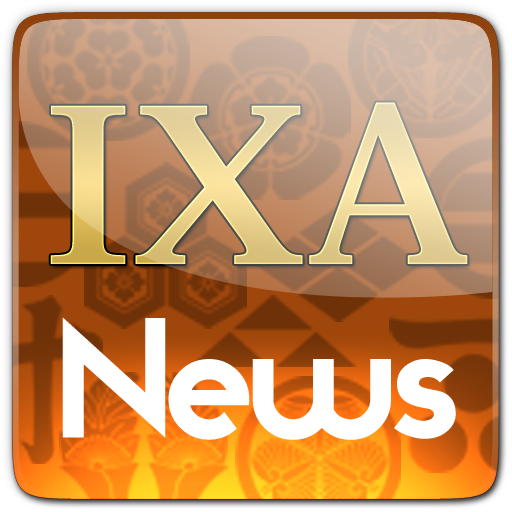
<style>
.page{position:relative;width:512px;height:512px}
.page>*{position:absolute;margin:0}
.t1{font:211.7px "KozMinPro-Bold";scale:1.19 1}
.t2{font:150.5px "Moderna";letter-spacing:-0.045em;color:#ffffff}
</style>
<div class="page">
<p class="t1" style="left:50px;top:102px;width:418px;height:162px">IXA</p>
<p class="t2" style="left:62px;top:317px;width:394px;height:123px">News</p>
</div>
